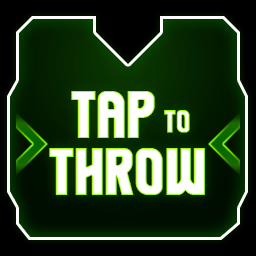
<style>
.page{position:relative;width:256px;height:256px}
.page>*{position:absolute;margin:0}
.t1{font:59.4px/57.7px "Komikazoom";color:#ffffff;text-transform:uppercase;font-weight:bold}
.t2{font:28.2px "Komikazoom";text-transform:uppercase;font-weight:bold}
</style>
<div class="page">
<p class="t1" style="left:49px;top:91px;width:156px;height:104px;text-align:center">Tap  <br>THROW</p>
<p class="t2" style="left:164px;top:110px;width:26px;height:23px">to</p>
</div>
